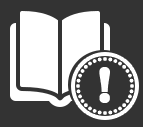
<style>
.page{position:relative;width:143px;height:127px;background:#333333}
.page>*{position:absolute;margin:0}
.t1{font:85.8px "BookmanOldStyle-Bold";color:#ffffff;font-weight:bold}
</style>
<div class="page">
<p class="t1" style="left:99px;top:67px;width:11px;height:36px">!</p>
</div>
